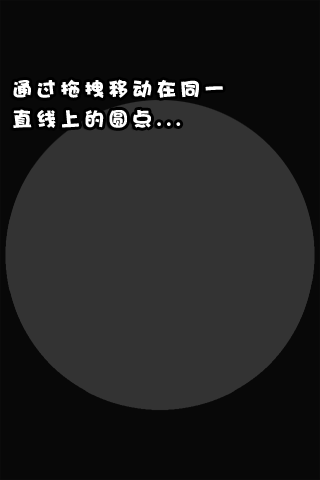
<style>
.page{position:relative;width:320px;height:480px;background:#333333}
.page>*{position:absolute;margin:0}
.t1{font:20px/30px "DFPHaiBaoW12";letter-spacing:0.2em;color:#ffffff}
</style>
<div class="page">
<p class="t1" style="left:13px;top:79px;width:210px;height:49px">通过拖拽移动在同一<br>直线上的圆点...</p>
</div>
